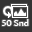
<style>
.page{position:relative;width:32px;height:32px;background:#333333}
.page>*{position:absolute;margin:0}
.t1{font:9px "AmiraParadiso";color:#ffffff}
</style>
<div class="page">
<p class="t1" style="left:2px;top:19px;width:27px;height:7px">50 Snd</p>
</div>
